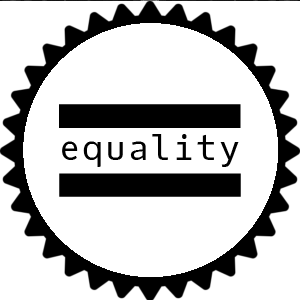
<style>
.page{position:relative;width:300px;height:300px;background:#ffffff}
.page>*{position:absolute;margin:0}
.t1{font:320px "OxygenMono-Regular";letter-spacing:0.05em;color:#000000}
.t2{font:35px "OxygenMono-Regular";letter-spacing:0.05em;color:#000000}
</style>
<div class="page">
<p class="t1" style="left:59px;top:103px;width:182px;height:93px">=</p>
<p class="t2" style="left:62px;top:133px;width:177px;height:33px">equality</p>
</div>
